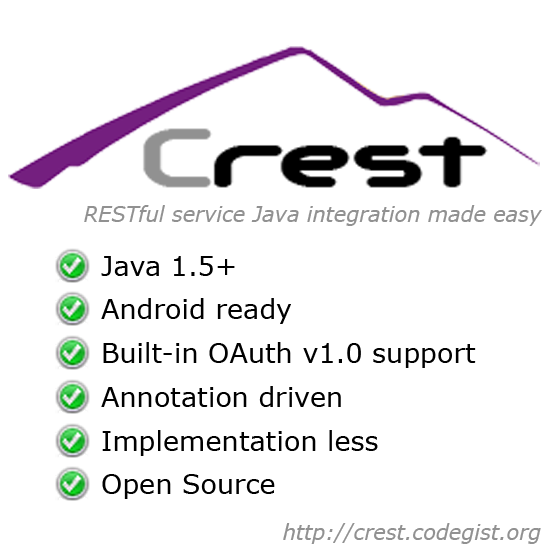
<style>
.page{position:relative;width:560px;height:560px;background:#ffffff}
.page>*{position:absolute;margin:0}
.t1{font:20.8px "Verdana-Italic";color:#919191}
.t2{font:27.1px/43.8px "Verdana";color:#000000}
</style>
<div class="page">
<p class="t1" style="left:84px;top:205px;width:458px;height:21px">RESTful service Java integration made easy</p>
<p class="t2" style="left:101px;top:256px;width:375px;height:243px">Java 1.5+<br>Android ready<br>Built-in OAuth v1.0 support<br>Annotation driven<br>Implementation less<br>Open Source</p>
<p class="t1" style="left:283px;top:523px;width:258px;height:21px">http://crest.codegist.org</p>
</div>
